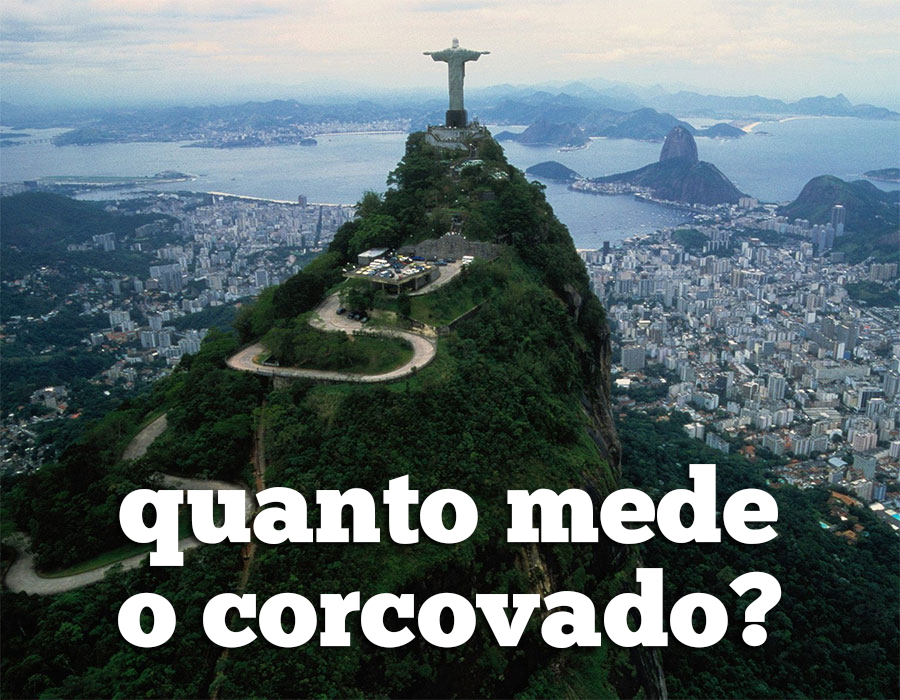
<style>
.page{position:relative;width:900px;height:700px}
.page>*{position:absolute;margin:0}
.t1{font:103.8px/103.8px "ChunkFive-Roman";color:#ffffff}
</style>
<div class="page">
<p class="t1" style="left:118px;top:464px;width:664px;height:184px">quanto mede<br>o corcovado?</p>
</div>
